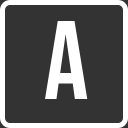
<style>
.page{position:relative;width:128px;height:128px;background:#333333}
.page>*{position:absolute;margin:0}
.t1{font:111.8px "BebasNeuePro-Bold";color:#ffffff}
</style>
<div class="page">
<p class="t1" style="left:45px;top:21px;width:43px;height:78px">A</p>
</div>
